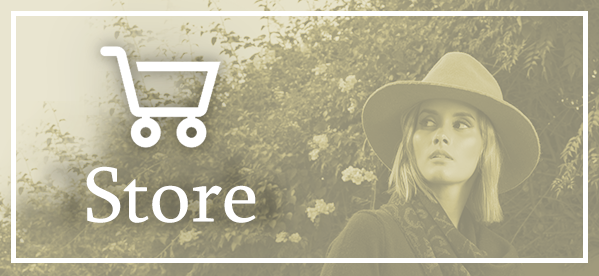
<style>
.page{position:relative;width:599px;height:276px}
.page>*{position:absolute;margin:0}
.t1{font:79.3px "Sylfaen";letter-spacing:0.01em;color:#ffffff}
</style>
<div class="page">
<p class="t1" style="left:86px;top:166px;width:170px;height:57px">Store</p>
</div>
